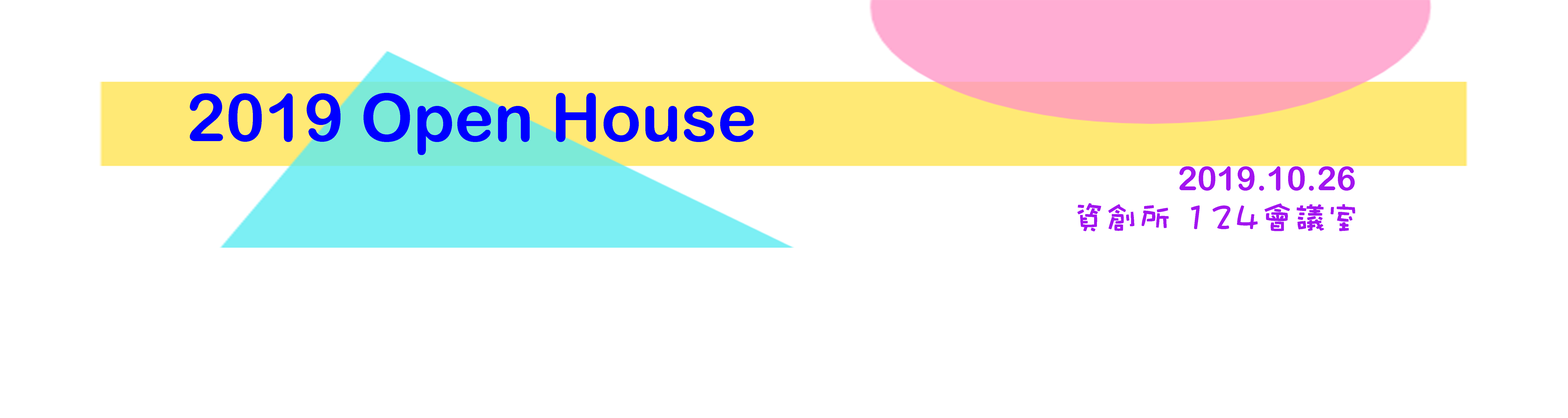
<style>
.page{position:relative;width:1568px;height:418px;background:#ffffff}
.page>*{position:absolute;margin:0}
.t1{font:66.4px "ArialRoundedMTBold";color:#0000ff}
.t2{font:33.2px "ArialRoundedMTBold";color:#a214ef}
.t3{font:33.2px "DFWaWa-W7-WINP-BF";color:#a214ef}
</style>
<div class="page">
<p class="t1" style="left:190px;top:93px;width:564px;height:62px">2019 Open House</p>
<p class="t2" style="left:1179px;top:166px;width:176px;height:25px">2019.10.26</p>
<p class="t3" style="left:1077px;top:203px;width:278px;height:28px">資創所 124會議室</p>
</div>
